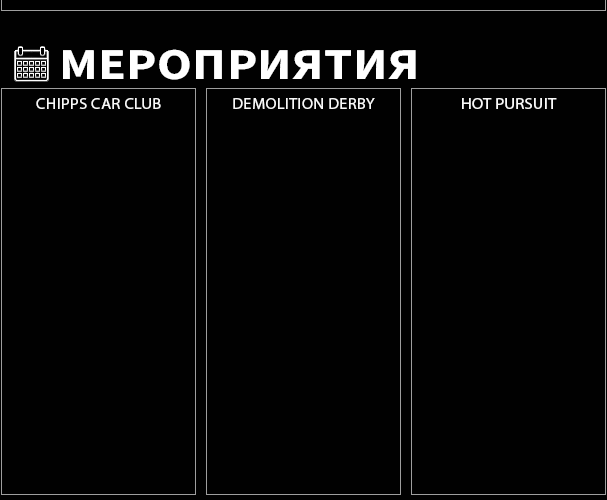
<style>
.page{position:relative;width:607px;height:500px;background:#010101}
.page>*{position:absolute;margin:0}
.t1{font:44px "SourceSansRoman-Bold";letter-spacing:0.01em;color:#ffffff;scale:1.16 1}
.t2{font:15.8px "MyriadPro-Regular";letter-spacing:0.02em;color:#f9f9f9;scale:1.03 1}
.t3{font:15.8px "MyriadPro-Regular";letter-spacing:0.02em;color:#f9f9f9;text-transform:uppercase;scale:1.03 1}
</style>
<div class="page">
<p class="t1" style="left:63px;top:49px;width:353px;height:31px">МЕРОПРИЯТИЯ</p>
<p class="t2" style="left:36px;top:98px;width:125px;height:11px">CHIPPS CAR CLUB</p>
<p class="t3" style="left:233px;top:98px;width:142px;height:12px">Demolition Derby</p>
<p class="t3" style="left:462px;top:98px;width:95px;height:11px">hot pursuit</p>
</div>
